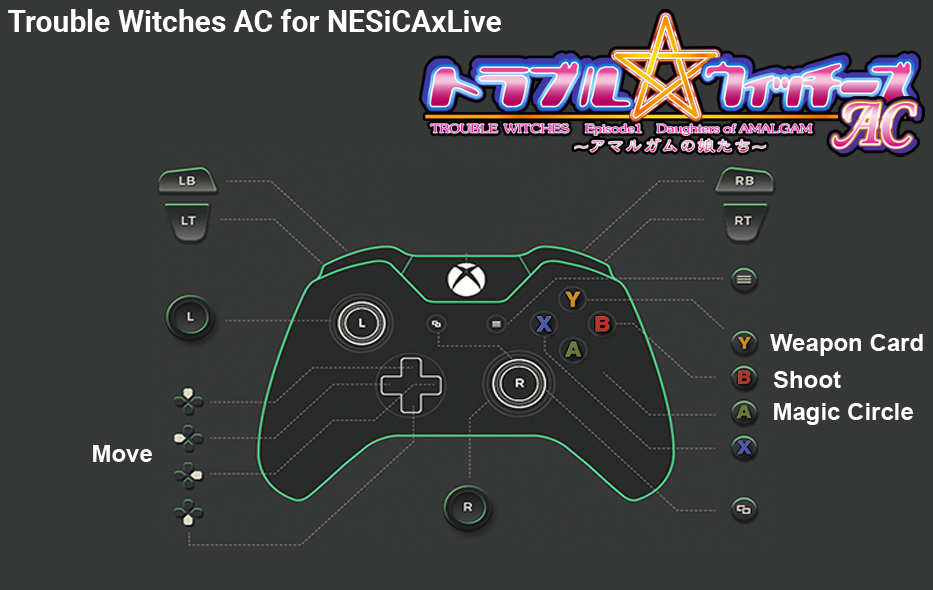
<style>
.page{position:relative;width:933px;height:590px;background:#363838}
.page>*{position:absolute;margin:0}
.t1{font:30px "Roboto-Bold";color:#ffffff}
.t2{font:24px "Arial-BoldMT";color:#fefefe}
</style>
<div class="page">
<p class="t1" style="left:8px;top:9px;width:493px;height:23px">Trouble Witches AC for NESiCAxLive</p>
<p class="t2" style="left:770px;top:334px;width:153px;height:22px">Weapon Card</p>
<p class="t2" style="left:773px;top:371px;width:68px;height:17px">Shoot</p>
<p class="t2" style="left:774px;top:403px;width:139px;height:22px">Magic Circle</p>
<p class="t2" style="left:93px;top:445px;width:59px;height:17px">Move</p>
</div>
